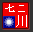
<style>
.page{position:relative;width:33px;height:32px;background:#f20000}
.page>*{position:absolute;margin:0}
.t1{font:10.4px "SimSun";color:#ffffff}
.t2{font:11.7px "SimSun";color:#ffffff}
</style>
<div class="page">
<p class="t1" style="left:5px;top:4px;width:20px;height:8px">七二</p>
<p class="t2" style="left:16px;top:15px;width:11px;height:12px">川</p>
</div>
